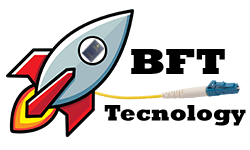
<style>
.page{position:relative;width:250px;height:150px;background:#ffffff}
.page>*{position:absolute;margin:0}
.t1{font:36.9px "Rockwell-ExtraBold";color:#000000;scale:1.13 1}
.t2{font:22.9px "Rockwell-ExtraBold";color:#000000}
</style>
<div class="page">
<p class="t1" style="left:131px;top:49px;width:94px;height:25px">BFT</p>
<p class="t2" style="left:104px;top:105px;width:142px;height:21px">Tecnology</p>
</div>
